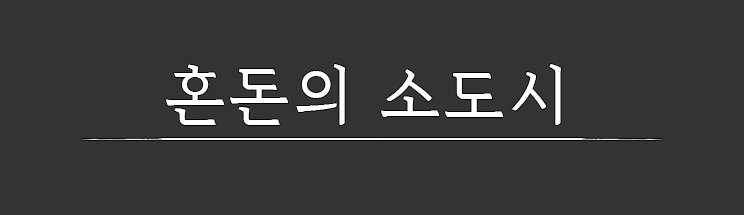
<style>
.page{position:relative;width:744px;height:215px;background:#333333}
.page>*{position:absolute;margin:0}
.t1{font:66.7px "KimjungchulMyungjo-Regular";letter-spacing:0.06em;color:#ffffff}
</style>
<div class="page">
<p class="t1" style="left:166px;top:64px;width:395px;height:61px">혼돈의 소도시</p>
</div>
